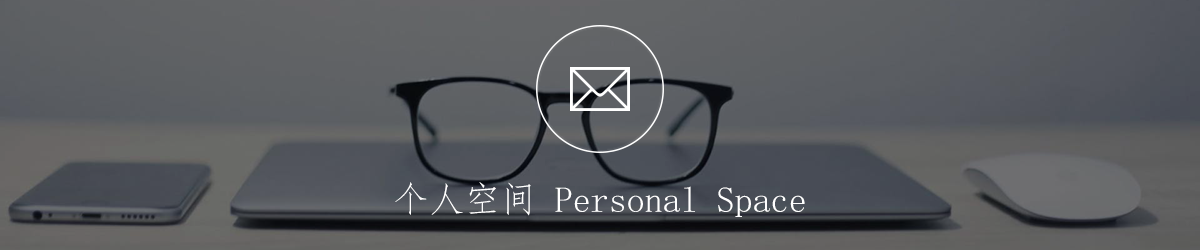
<style>
.page{position:relative;width:1200px;height:250px}
.page>*{position:absolute;margin:0}
.t1{font:36px "FangSong";color:#ffffff}
</style>
<div class="page">
<p class="t1" style="left:395px;top:182px;width:410px;height:35px">个人空间 Personal Space</p>
</div>
